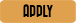
<style>
.page{position:relative;width:76px;height:23px;background:#dfa14e}
.page>*{position:absolute;margin:0}
.t1{font:12.8px "Bazar";color:#000000}
</style>
<div class="page">
<p class="t1" style="left:23px;top:4px;width:30px;height:13px">APPLY</p>
</div>
